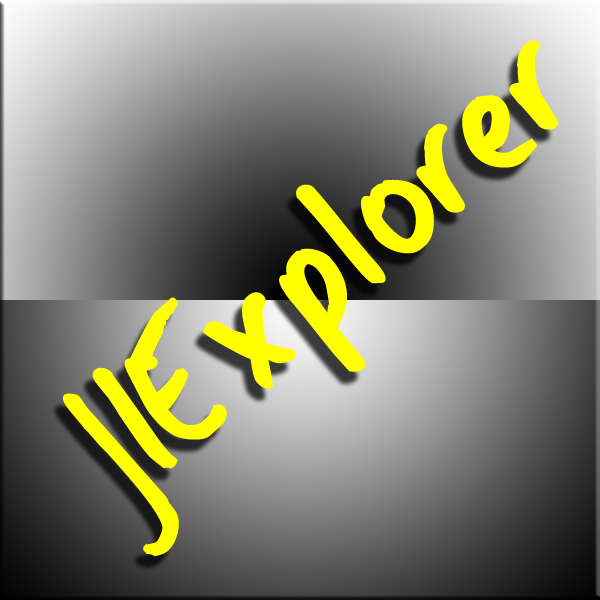
<style>
.page{position:relative;width:600px;height:600px}
.page>*{position:absolute;margin:0}
.t1{font:186.3px "EagerNaturalist";color:#ffff00;font-weight:bold;scale:0.74 1}
</style>
<div class="page">
<p class="t1" style="left:63px;top:40px;width:495px;height:517px;rotate:-42deg">JIExplorer</p>
</div>
